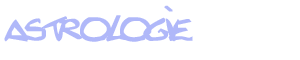
<style>
.page{position:relative;width:300px;height:60px;background:#ffffff}
.page>*{position:absolute;margin:0}
.t1{font:60px "Texted'critureLanfeust";color:#b0b8f9}
</style>
<div class="page">
<p class="t1" style="left:4px;top:5px;width:189px;height:37px">astrologie</p>
</div>
